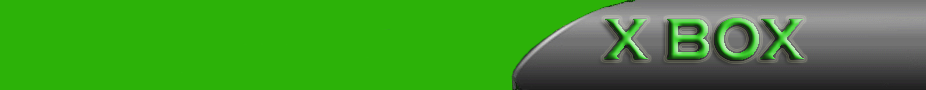
<style>
.page{position:relative;width:926px;height:90px;background:#2cb208}
.page>*{position:absolute;margin:0}
.t1{font:60px "CopperplateGothic-Bold";text-transform:uppercase}
</style>
<div class="page">
<p class="t1" style="left:604px;top:18px;width:200px;height:42px">X box</p>
</div>
